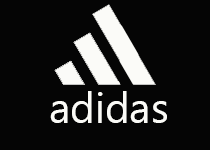
<style>
.page{position:relative;width:210px;height:150px;background:#050505}
.page>*{position:absolute;margin:0}
.t1{font:41.7px "MyanmarText";color:#fbfbf7}
</style>
<div class="page">
<p class="t1" style="left:50px;top:91px;width:117px;height:32px">adidas</p>
</div>
